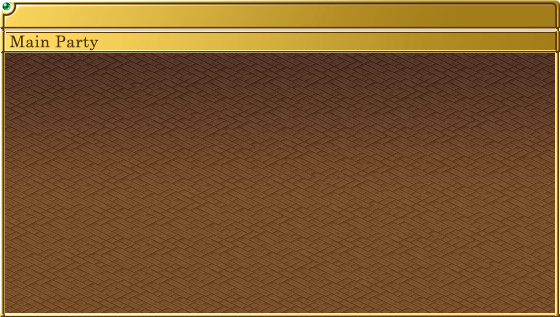
<style>
.page{position:relative;width:560px;height:317px}
.page>*{position:absolute;margin:0}
.t1{font:16px "CenturySchoolbook";letter-spacing:0.025em;color:#4b320e}
</style>
<div class="page">
<p class="t1" style="left:10px;top:35px;width:89px;height:16px">Main Party</p>
</div>
